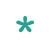
<style>
.page{position:relative;width:50px;height:50px;background:#ffffff}
.page>*{position:absolute;margin:0}
.t1{font:41.5px "ArialRoundedMTBold";color:#25a194;scale:1.04 1}
</style>
<div class="page">
<p class="t1" style="left:16px;top:16px;width:18px;height:17px">*</p>
</div>
